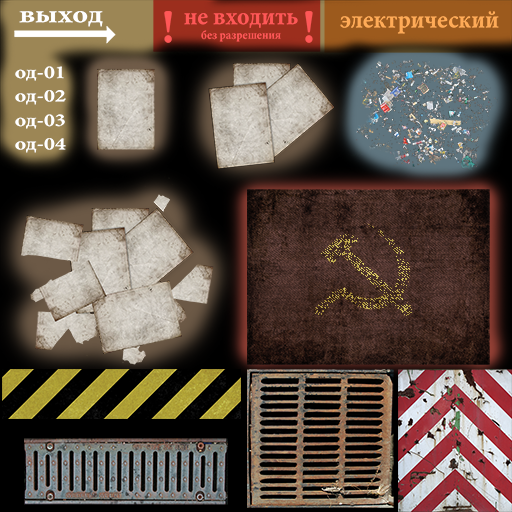
<style>
.page{position:relative;width:512px;height:512px}
.page>*{position:absolute;margin:0}
.t1{font:25.4px "MinionPro-BoldCn";color:#ffffff;scale:1.29 1}
.t2{font:47.8px "MinionPro-BoldCn";color:#ff5757}
.t3{font:12px "MinionPro-BoldCn";color:#ff5757}
.t4{font:25.3px "MinionPro-BoldCn";color:#ff5757}
.t5{font:25.3px "MinionPro-BoldCn";color:#ffab57}
.t6{font:18.2px "MinionPro-BoldCn";color:#ffffff;scale:1.29 1}
</style>
<div class="page">
<p class="t1" style="left:19px;top:11px;width:84px;height:16px">выход</p>
<p class="t2" style="left:164px;top:11px;width:8px;height:32px">!</p>
<p class="t3" style="left:184px;top:13px;width:114px;height:29px;text-align:center"><span class="t4">не входить<br></span>без разрешения</p>
<p class="t2" style="left:305px;top:11px;width:8px;height:32px">!</p>
<p class="t5" style="left:340px;top:11px;width:159px;height:23px">электрический</p>
<p class="t6" style="left:15px;top:66px;width:49px;height:15px">од-01</p>
<p class="t6" style="left:15px;top:90px;width:51px;height:15px">од-02</p>
<p class="t6" style="left:15px;top:114px;width:50px;height:15px">од-03</p>
<p class="t6" style="left:15px;top:138px;width:51px;height:15px">од-04</p>
</div>
